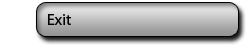
<style>
.page{position:relative;width:250px;height:50px;background:#ffffff}
.page>*{position:absolute;margin:0}
.t1{font:16px "MyriadPro-Regular";color:#000000}
</style>
<div class="page">
<p class="t1" style="left:48px;top:14px;width:23px;height:11px">Exit</p>
</div>
